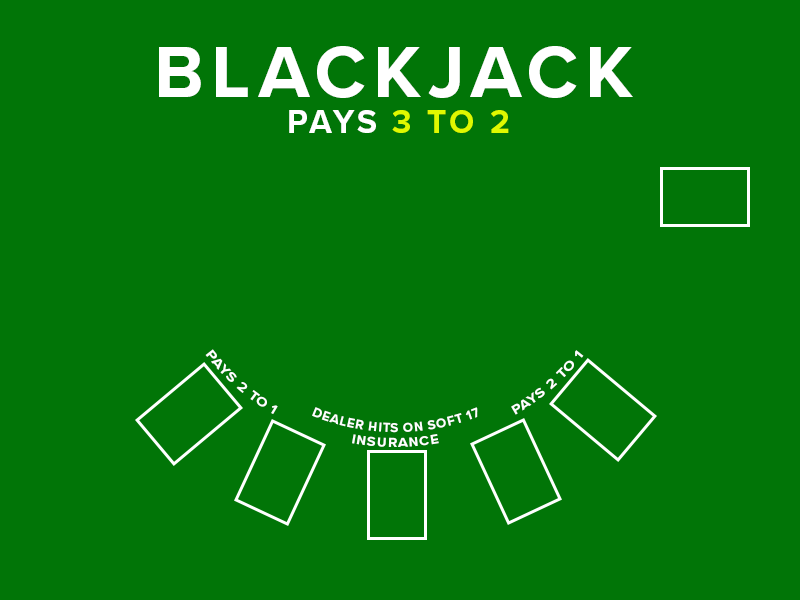
<style>
.page{position:relative;width:800px;height:600px;background:#017507}
.page>*{position:absolute;margin:0}
.t1{font:75px "ProximaNova-Bold";letter-spacing:0.1em;color:#ffffff;text-transform:uppercase}
.t2{font:33.3px "ProximaNova-Bold";letter-spacing:0.1em;color:#dff900;text-transform:uppercase}
.t3{font:33.3px "ProximaNova-Bold";letter-spacing:0.1em;color:#ffffff;text-transform:uppercase}
.t4{font:12.5px "ProximaNova-Bold";letter-spacing:0.05em;color:#ffffff;text-transform:uppercase}
</style>
<div class="page">
<p class="t1" style="left:159px;top:46px;width:474px;height:52px">blackjack</p>
<p class="t2" style="left:289px;top:110px;width:220px;height:23px"><span class="t3">Pays </span>3 to 2</p>
<p class="t4" style="left:205px;top:349px;width:379px;height:98px;text-align:right">PAYS 2 TO 1  INSURANCE  PAYS 2 TO 1</p>
<p class="t4" style="left:312px;top:407px;width:166px;height:26px;text-align:right">dealer hits on soft 17</p>
</div>
